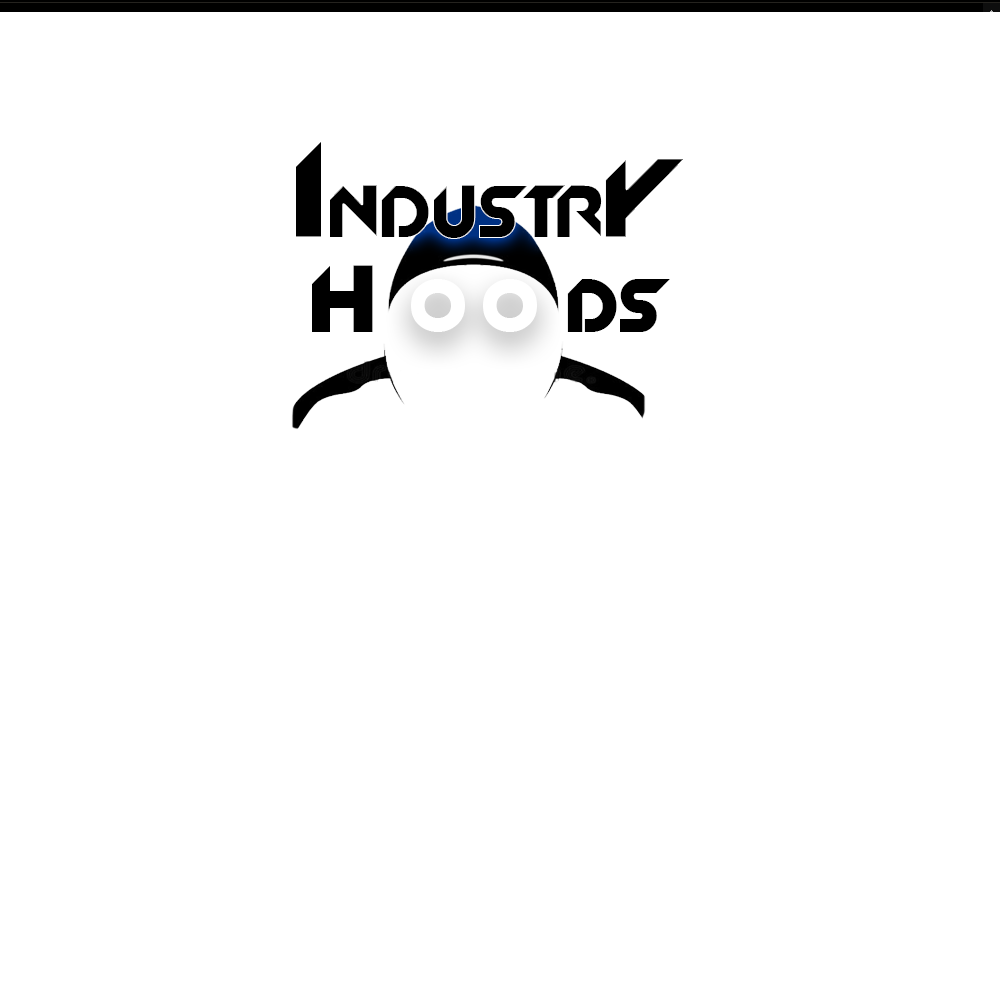
<style>
.page{position:relative;width:1000px;height:1000px;background:#ffffff}
.page>*{position:absolute;margin:0}
.t1{font:100px "Slant";color:#000000}
.t2{font:150px "Slant";color:#000000}
.t3{font:100px "Slant";color:#ffffff}
</style>
<div class="page">
<p class="t1" style="left:295px;top:139px;width:391px;height:100px"><span class="t2">I</span>ndustr<span class="t2">y</span></p>
<p class="t1" style="left:312px;top:265px;width:61px;height:67px">H</p>
<p class="t3" style="left:411px;top:279px;width:126px;height:53px">o o</p>
<p class="t1" style="left:567px;top:279px;width:103px;height:53px">ds</p>
</div>
